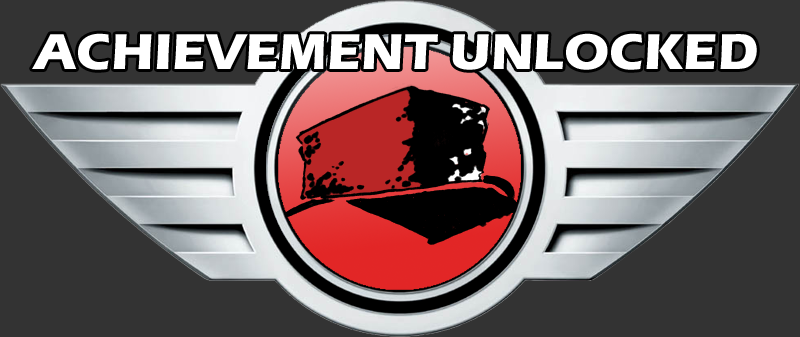
<style>
.page{position:relative;width:800px;height:337px;background:#333333}
.page>*{position:absolute;margin:0}
.t1{font:52px "ErasITC-Bold";color:#ffffff}
</style>
<div class="page">
<p class="t1" style="left:32px;top:33px;width:725px;height:37px">ACHIEVEMENT UNLOCKED</p>
</div>
